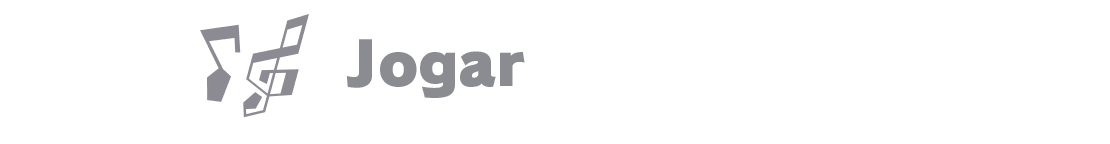
<style>
.page{position:relative;width:1110px;height:144px;background:#ffffff}
.page>*{position:absolute;margin:0}
.t1{font:60px "RodinPro-UB";color:#8b8c92}
</style>
<div class="page">
<p class="t1" style="left:347px;top:39px;width:178px;height:59px">Jogar</p>
</div>
